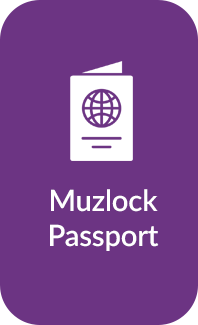
<style>
.page{position:relative;width:198px;height:325px;background:#6c3483}
.page>*{position:absolute;margin:0}
.t1{font:29.2px "Lato-Semibold";letter-spacing:-0.005em;color:#ffffff}
</style>
<div class="page">
<p class="t1" style="left:50px;top:189px;width:109px;height:62px;text-align:center">Muzlock<br>Passport</p>
</div>
